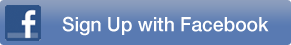
<style>
.page{position:relative;width:291px;height:45px;background:#597ab2}
.page>*{position:absolute;margin:0}
.t1{font:20px "HelveticaNeue-Medium";color:#ffffff;scale:0.96 1}
</style>
<div class="page">
<p class="t1" style="left:62px;top:16px;width:207px;height:20px">Sign Up with Facebook</p>
</div>
